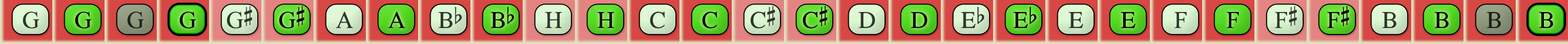
<style>
.page{position:relative;width:1568px;height:44px}
.page>*{position:absolute;margin:0}
.t1{font:24.1px "OpusChords";color:#2f352d}
.t2{font:24.1px "OpusChords";color:#000000}
.t3{font:24.1px "OpusChords";color:#1e211b}
.t4{font:24.1px "OpusChords";letter-spacing:-0.025em;color:#2f352d}
.t5{font:24.1px "OpusChords";letter-spacing:-0.025em;color:#000000}
.t6{font:24.1px "OpusChords";color:#30352d}
.t7{font:24.1px "OpusChords";color:#30362e}
.t8{font:24.1px "OpusChords";color:#1f211b}
</style>
<div class="page">
<p class="t1" style="left:23px;top:12px;width:16px;height:17px">G</p>
<p class="t2" style="left:75px;top:12px;width:16px;height:17px">G</p>
<p class="t3" style="left:127px;top:12px;width:17px;height:17px">G</p>
<p class="t2" style="left:179px;top:12px;width:17px;height:17px">G</p>
<p class="t4" style="left:227px;top:6px;width:25px;height:23px">G#</p>
<p class="t5" style="left:279px;top:6px;width:26px;height:23px">G#</p>
<p class="t1" style="left:336px;top:12px;width:17px;height:16px">A</p>
<p class="t2" style="left:388px;top:12px;width:17px;height:16px">A</p>
<p class="t6" style="left:438px;top:7px;width:24px;height:21px">Bb</p>
<p class="t2" style="left:491px;top:7px;width:23px;height:21px">Bb</p>
<p class="t6" style="left:545px;top:12px;width:17px;height:16px">H</p>
<p class="t2" style="left:597px;top:12px;width:17px;height:16px">H</p>
<p class="t7" style="left:650px;top:12px;width:15px;height:17px">C</p>
<p class="t2" style="left:702px;top:12px;width:15px;height:17px">C</p>
<p class="t1" style="left:750px;top:6px;width:25px;height:23px">C#</p>
<p class="t2" style="left:803px;top:6px;width:24px;height:23px">C#</p>
<p class="t1" style="left:858px;top:12px;width:17px;height:16px">D</p>
<p class="t2" style="left:911px;top:12px;width:16px;height:16px">D</p>
<p class="t6" style="left:961px;top:7px;width:24px;height:21px">Eb</p>
<p class="t2" style="left:1013px;top:7px;width:24px;height:21px">Eb</p>
<p class="t7" style="left:1068px;top:12px;width:15px;height:16px">E</p>
<p class="t2" style="left:1121px;top:12px;width:14px;height:16px">E</p>
<p class="t7" style="left:1174px;top:12px;width:13px;height:16px">F</p>
<p class="t2" style="left:1226px;top:12px;width:13px;height:16px">F</p>
<p class="t6" style="left:1275px;top:6px;width:22px;height:22px">F#</p>
<p class="t2" style="left:1327px;top:6px;width:22px;height:22px">F#</p>
<p class="t6" style="left:1382px;top:12px;width:15px;height:16px">B</p>
<p class="t2" style="left:1434px;top:12px;width:15px;height:16px">B</p>
<p class="t8" style="left:1487px;top:12px;width:14px;height:16px">B</p>
<p class="t2" style="left:1539px;top:12px;width:14px;height:16px">B</p>
</div>
